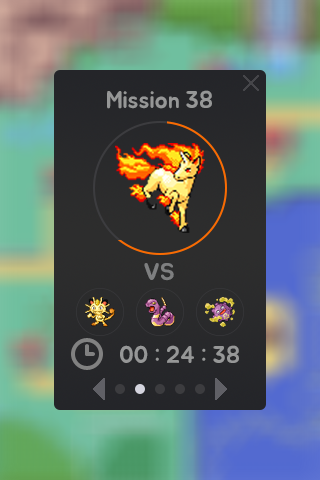
<style>
.page{position:relative;width:320px;height:480px}
.page>*{position:absolute;margin:0}
.t1{font:24px "BMJUA";color:#969797}
.t2{font:24px "BMJUA";color:#7e7f80}
</style>
<div class="page">
<p class="t1" style="left:107px;top:90px;width:105px;height:19px">Mission 38</p>
<p class="t2" style="left:144px;top:263px;width:30px;height:18px">VS</p>
<p class="t1" style="left:120px;top:345px;width:119px;height:18px">00 : 24 : 38</p>
</div>
